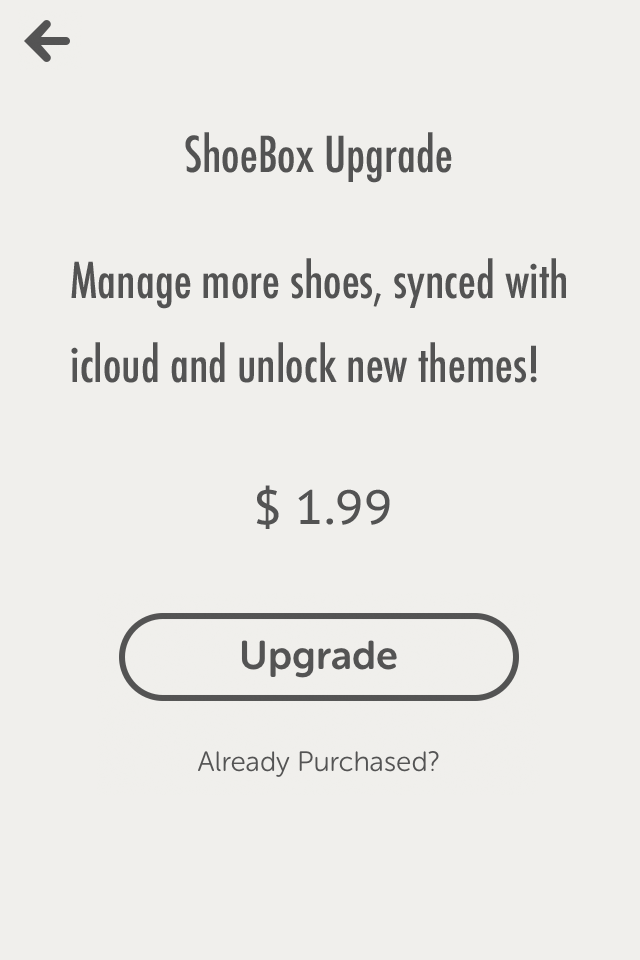
<style>
.page{position:relative;width:640px;height:960px;background:#f0efec}
.page>*{position:absolute;margin:0}
.t1{font:48px "Futura-CondensedMedium";color:#535353}
.t2{font:48px "PTSans-Caption";color:#535353}
</style>
<div class="page">
<p class="t1" style="left:185px;top:132px;width:267px;height:51px">ShoeBox Upgrade</p>
<p class="t1" style="left:71px;top:258px;width:495px;height:125px">Manage more shoes, synced with <br>icloud and unlock new themes!</p>
<p class="t2" style="left:256px;top:485px;width:134px;height:44px">$ 1.99</p>
</div>
